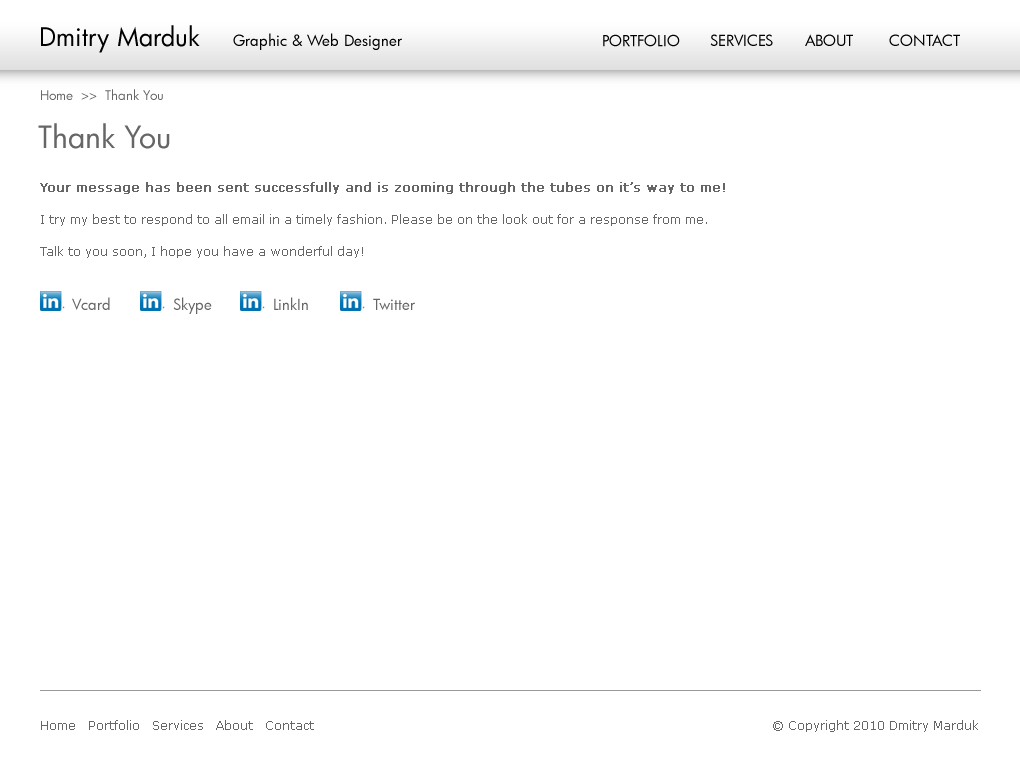
<style>
.page{position:relative;width:1020px;height:771px;background:#ffffff}
.page>*{position:absolute;margin:0}
.t1{font:25px "FuturaBk";color:#000000}
.t2{font:15px "FuturaBk";color:#000000}
.t3{font:13px "FuturaBk";color:#666666}
.t4{font:30px "FuturaBk";color:#666666}
.t5{font:12px/16px "Verdana";color:#666666}
.t6{font:12px/16px "Verdana";color:#666666;font-weight:bold}
.t7{font:15px "FuturaBk";color:#666666}
</style>
<div class="page">
<p class="t1" style="left:41px;top:25px;width:159px;height:28px">Dmitry Marduk</p>
<p class="t2" style="left:233px;top:33px;width:169px;height:17px">Graphic &amp; Web Designer</p>
<p class="t2" style="left:603px;top:34px;width:77px;height:13px">PORTFOLIO</p>
<p class="t2" style="left:710px;top:34px;width:63px;height:12px">SERVICES</p>
<p class="t2" style="left:805px;top:34px;width:48px;height:12px">ABOUT</p>
<p class="t2" style="left:889px;top:34px;width:71px;height:12px">CONTACT</p>
<p class="t3" style="left:41px;top:89px;width:122px;height:11px">Home  &gt;&gt;  Thank You</p>
<p class="t4" style="left:38px;top:123px;width:132px;height:26px">Thank You</p>
<p class="t5" style="left:40px;top:182px;width:685px;height:76px"><span class="t6">Your message has been sent successfully and is zooming through the tubes on it’s way to me! <br><br></span>I try my best to respond to all email in a timely fashion. Please be on the look out for a response from me. <br><br>Talk to you soon, I hope you have a wonderful day!</p>
<p class="t7" style="left:72px;top:297px;width:38px;height:13px">Vcard</p>
<p class="t7" style="left:173px;top:297px;width:39px;height:17px">Skype</p>
<p class="t7" style="left:274px;top:297px;width:34px;height:13px">LinkIn</p>
<p class="t7" style="left:373px;top:298px;width:42px;height:12px">Twitter</p>
</div>
